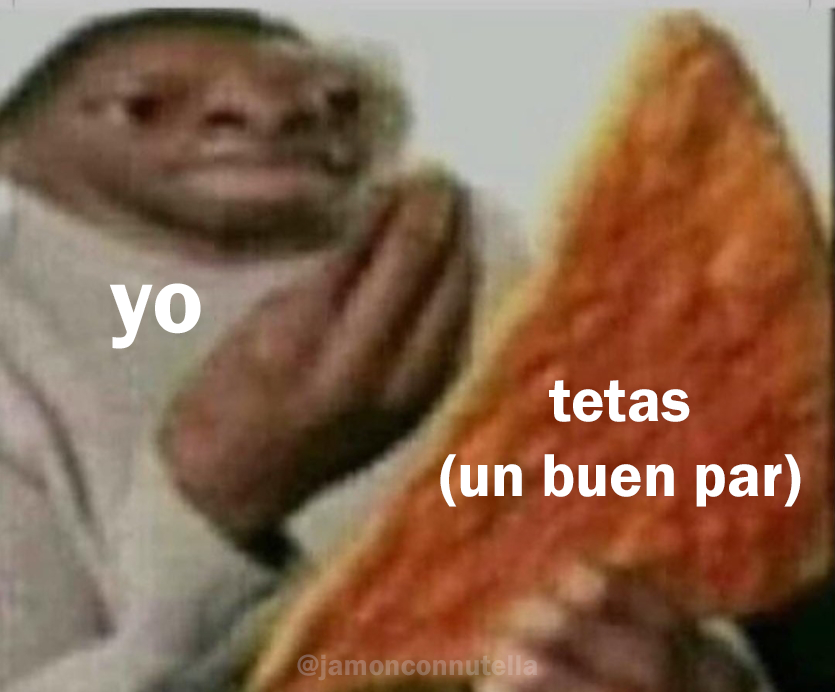
<style>
.page{position:relative;width:835px;height:692px}
.page>*{position:absolute;margin:0}
.t1{font:96px "FranklinGothic-Demi";color:#ffffff}
.t2{font:62.8px "FranklinGothic-Demi";color:#ffffff}
.t3{font:29.7px "FranklinGothic-Demi";color:#a77a5f}
</style>
<div class="page">
<p class="t1" style="left:109px;top:283px;width:92px;height:66px">yo</p>
<p class="t2" style="left:440px;top:380px;width:361px;height:127px;text-align:center">tetas<br>(un buen par)</p>
<p class="t3" style="left:297px;top:654px;width:241px;height:27px">@jamonconnutella</p>
</div>
